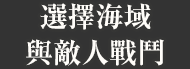
<style>
.page{position:relative;width:190px;height:69px;background:#333333}
.page>*{position:absolute;margin:0}
.t1{font:28px/36px "RyuminPr6N-ExBold";color:#fffdf9}
</style>
<div class="page">
<p class="t1" style="left:26px;top:3px;width:138px;height:63px;text-align:center">選擇海域<br>與敵人戰鬥</p>
</div>
